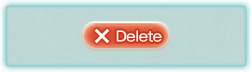
<style>
.page{position:relative;width:252px;height:72px}
.page>*{position:absolute;margin:0}
.t1{font:14px "GothicMB101Pro-Medium";letter-spacing:-0.04em;color:#fff5ef}
</style>
<div class="page">
<p class="t1" style="left:116px;top:30px;width:46px;height:12px">Delete</p>
</div>
